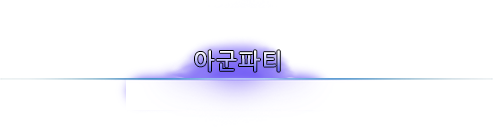
<style>
.page{position:relative;width:493px;height:127px;background:#ffffff}
.page>*{position:absolute;margin:0}
.t1{font:22px "MalgunGothicRegular";font-weight:bold}
</style>
<div class="page">
<p class="t1" style="left:195px;top:50px;width:85px;height:22px">아군파티</p>
</div>
